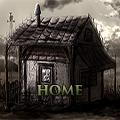
<style>
.page{position:relative;width:120px;height:120px}
.page>*{position:absolute;margin:0}
.t1{font:13px "TrajanPro-Bold"}
</style>
<div class="page">
<p class="t1" style="left:37px;top:85px;width:45px;height:11px">HOME</p>
</div>
